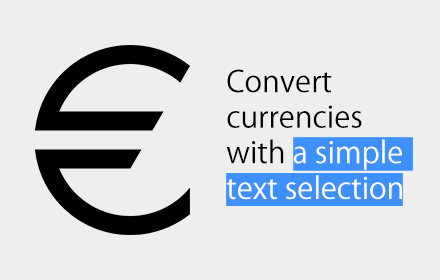
<style>
.page{position:relative;width:440px;height:280px;background:#eeeeee}
.page>*{position:absolute;margin:0}
.t1{font:29.6px "KozGoPr6N-Regular";color:#000000}
.t2{font:29.6px "KozGoPr6N-Regular";color:#ffffff}
</style>
<div class="page">
<p class="t1" style="left:226px;top:69px;width:176px;height:131px;text-align:right">Convert currencies with <span class="t2">a simple text selection</span></p>
</div>
